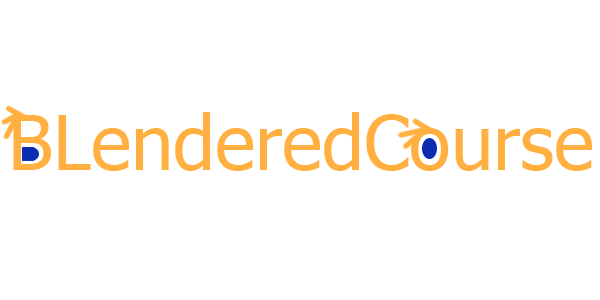
<style>
.page{position:relative;width:600px;height:300px;background:#ffffff}
.page>*{position:absolute;margin:0}
.t1{font:76px "Tahoma";color:#ffb040}
</style>
<div class="page">
<p class="t1" style="left:13px;top:112px;width:579px;height:59px">BLenderedCourse</p>
</div>
